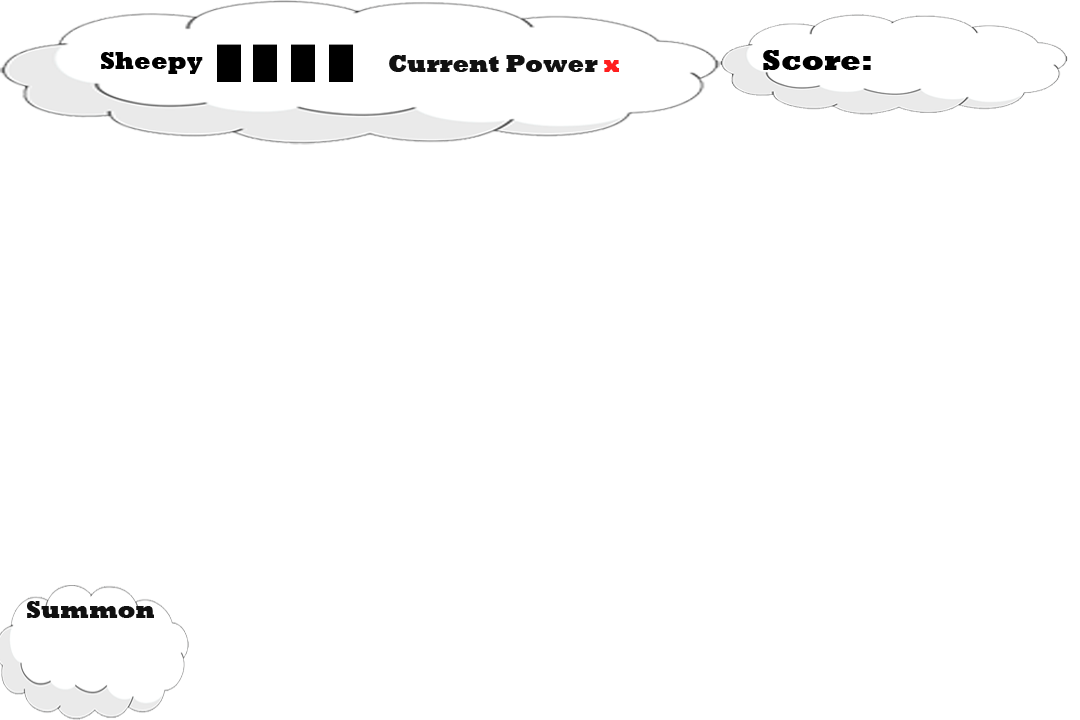
<style>
.page{position:relative;width:1080px;height:720px;background:#ffffff}
.page>*{position:absolute;margin:0}
.t1{font:24px "Rockwell-ExtraBold";color:#000000}
.t2{font:24px "Rockwell-ExtraBold";color:#111111}
.t3{font:24px "Rockwell-ExtraBold";color:#ff1e1e}
</style>
<div class="page">
<p class="t1" style="left:101px;top:52px;width:102px;height:22px">Sheepy</p>
<p class="t2" style="left:389px;top:55px;width:230px;height:17px">Current Power <span class="t3">x</span></p>
<p class="t2" style="left:27px;top:601px;width:127px;height:17px">Summon</p>
</div>
